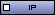
<style>
.page{position:relative;width:55px;height:15px;background:#000000}
.page>*{position:absolute;margin:0}
.t1{font:8px "BitDustTwo";color:#000000}
</style>
<div class="page">
<p class="t1" style="left:29px;top:5px;width:7px;height:5px">IP</p>
</div>
